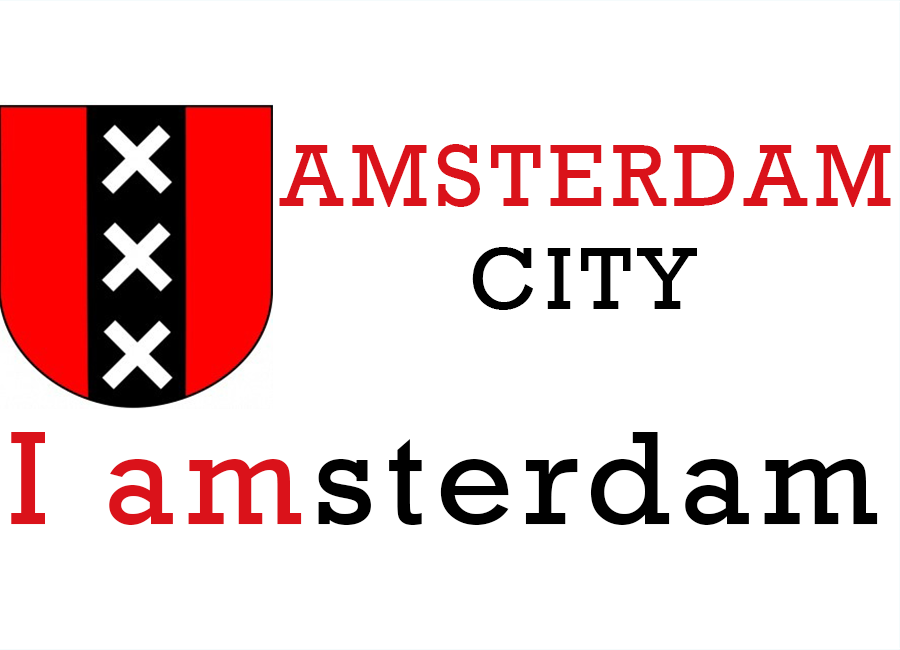
<style>
.page{position:relative;width:900px;height:650px;background:#ffffff}
.page>*{position:absolute;margin:0}
.t1{font:90.2px "Rockwell";letter-spacing:0.075em;color:#da121a}
.t2{font:90.2px "Rockwell";letter-spacing:0.075em;color:#000000}
.t3{font:135.3px "Rockwell";letter-spacing:0.075em;color:#000000}
.t4{font:135.3px "Rockwell";letter-spacing:0.075em;color:#da121a}
</style>
<div class="page">
<p class="t1" style="left:279px;top:144px;width:612px;height:63px">AMSTERDAM</p>
<p class="t2" style="left:472px;top:247px;width:225px;height:63px">CITY</p>
<p class="t3" style="left:11px;top:432px;width:867px;height:93px"><span class="t4">I am</span>sterdam</p>
</div>
